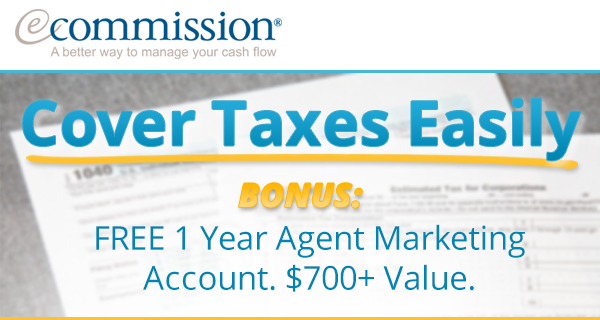
<style>
.page{position:relative;width:600px;height:320px;background:#ffffff}
.page>*{position:absolute;margin:0}
.t1{font:61.9px "OpenSans-Bold";color:#139ac8}
.t2{font:61.9px "OpenSans-Bold"}
.t3{font:32.9px "OpenSans-ExtraboldItalic"}
.t4{font:32.9px/40px "OpenSans";color:#0085b2}
</style>
<div class="page">
<p class="t1" style="left:23px;top:98px;width:558px;height:63px">Cover Taxes Easily</p>
<p class="t2" style="left:26px;top:102px;width:558px;height:62px">Cover Taxes Easily</p>
<p class="t3" style="left:239px;top:183px;width:123px;height:25px">BONUS:</p>
<p class="t4" style="left:96px;top:224px;width:429px;height:68px;text-align:center">FREE 1 Year Agent Marketing<br>Account. $700+ Value.</p>
</div>
